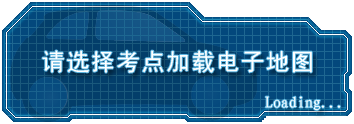
<style>
.page{position:relative;width:354px;height:124px}
.page>*{position:absolute;margin:0}
.t1{font:24px "SimHei";letter-spacing:0.04em;color:#ffffff}
.t2{font:16px "KaiTi_GB2312";color:#ffffff}
</style>
<div class="page">
<p class="t1" style="left:42px;top:50px;width:270px;height:23px">请选择考点加载电子地图</p>
<p class="t2" style="left:265px;top:96px;width:76px;height:15px">Loading...</p>
</div>
